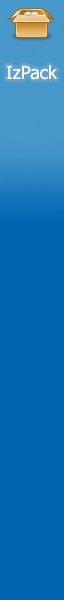
<style>
.page{position:relative;width:64px;height:600px;background:#0064b1}
.page>*{position:absolute;margin:0}
.t1{font:18px "Tahoma";color:#ffffff}
</style>
<div class="page">
<p class="t1" style="left:6px;top:65px;width:52px;height:15px">IzPack</p>
</div>
